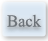
<style>
.page{position:relative;width:48px;height:41px}
.page>*{position:absolute;margin:0}
.t1{font:16.9px "TimesNewRomanPSMT";color:#6d7379}
</style>
<div class="page">
<p class="t1" style="left:7px;top:14px;width:35px;height:13px">Back</p>
</div>
